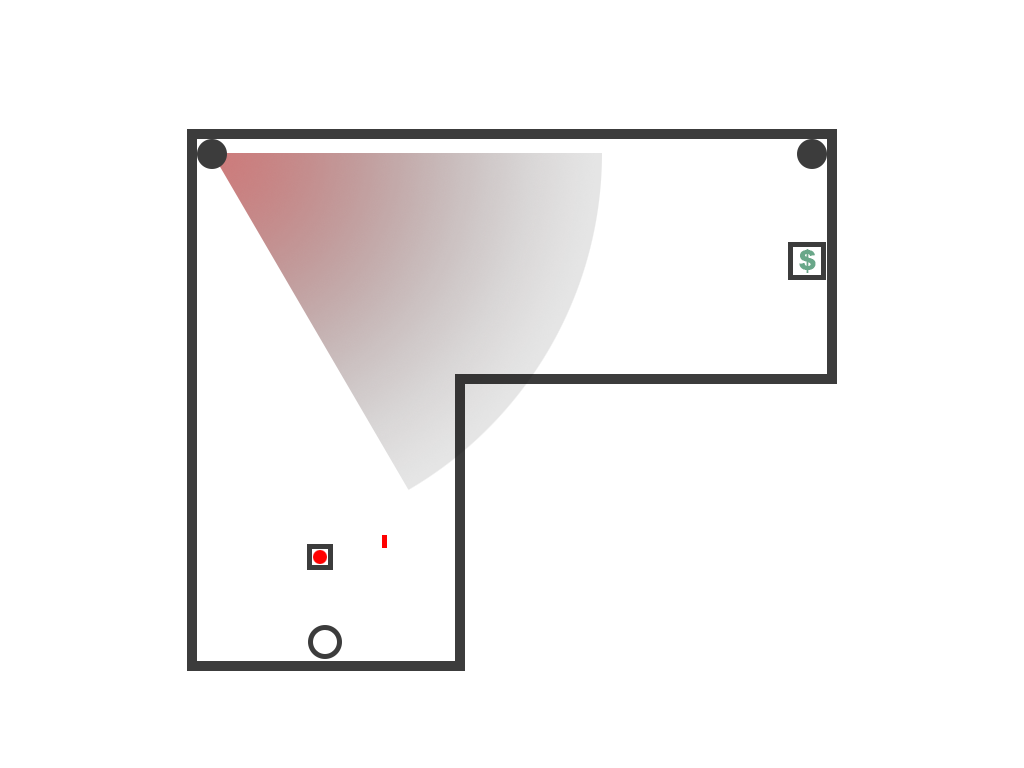
<style>
.page{position:relative;width:1024px;height:768px;background:#ffffff}
.page>*{position:absolute;margin:0}
.t1{font:27px "Arial-Black";color:#69a789}
</style>
<div class="page">
<p class="t1" style="left:799px;top:249px;width:17px;height:24px">$</p>
</div>
